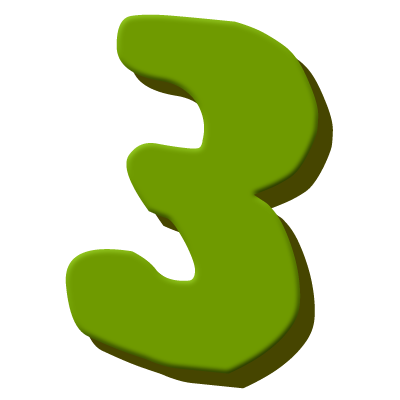
<style>
.page{position:relative;width:400px;height:400px;background:#ffffff}
.page>*{position:absolute;margin:0}
.t1{font:487.5px "#44Font";color:#6f9a00}
</style>
<div class="page">
<p class="t1" style="left:65px;top:14px;width:254px;height:360px;rotate:6deg">3</p>
<p class="t1" style="left:80px;top:29px;width:253px;height:360px;rotate:6deg">3</p>
</div>
